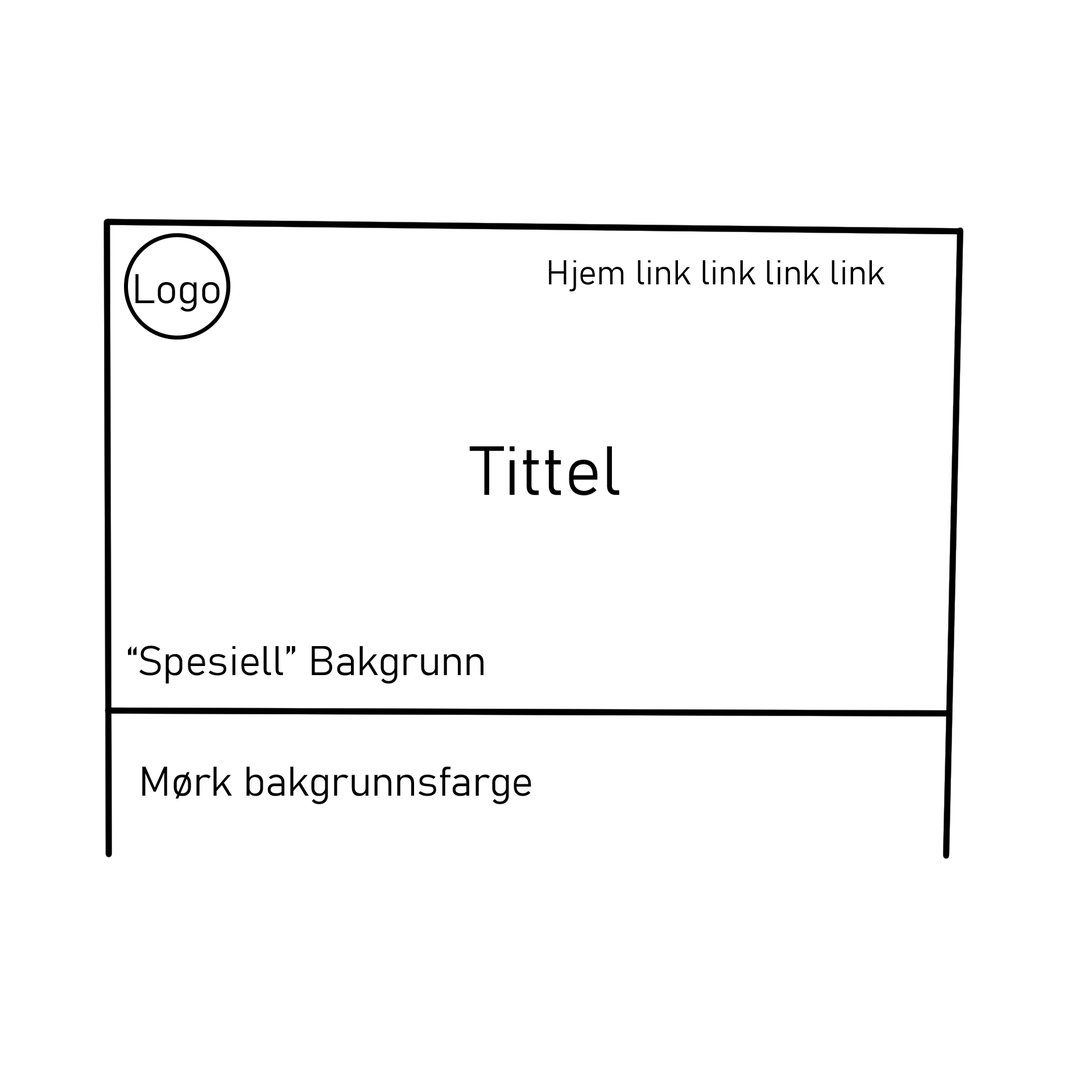
<style>
.page{position:relative;width:1092px;height:1092px;background:#ffffff}
.page>*{position:absolute;margin:0}
.t1{font:34.1px "Bahnschrift-Light";color:#000000}
.t2{font:40.9px "Bahnschrift-Light";color:#000000}
.t3{font:68.2px "Bahnschrift-Light";color:#000000}
</style>
<div class="page">
<p class="t1" style="left:549px;top:260px;width:336px;height:32px">Hjem link link link link</p>
<p class="t2" style="left:135px;top:274px;width:85px;height:38px">Logo</p>
<p class="t3" style="left:469px;top:446px;width:150px;height:49px">Tittel</p>
<p class="t2" style="left:128px;top:646px;width:355px;height:38px">“Spesiell” Bakgrunn</p>
<p class="t2" style="left:142px;top:767px;width:389px;height:37px">Mørk bakgrunnsfarge</p>
</div>
